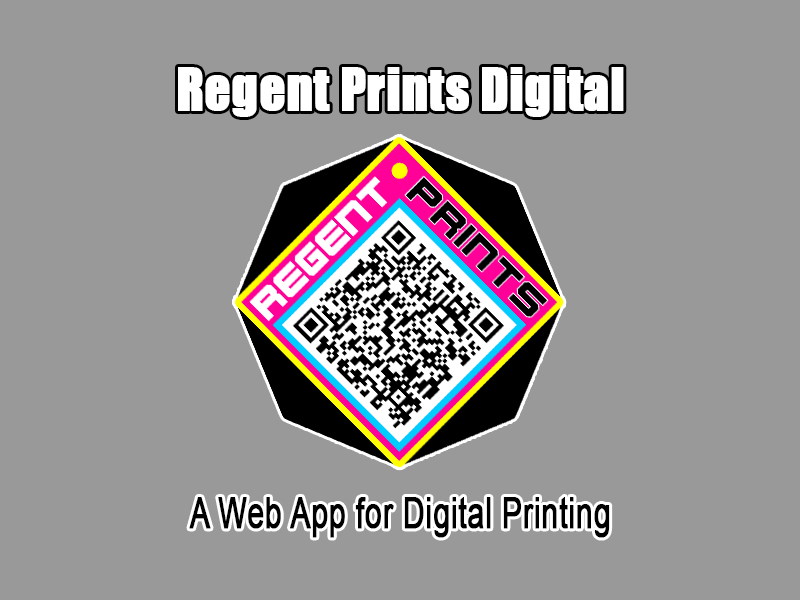
<style>
.page{position:relative;width:800px;height:600px;background:#999999}
.page>*{position:absolute;margin:0}
.t1{font:53.8px "Impact";color:#ffffff;font-weight:bold;scale:0.93 1}
.t2{font:43.1px "ArialMT";color:#000000;font-weight:bold;scale:0.7 1}
</style>
<div class="page">
<p class="t1" style="left:178px;top:67px;width:446px;height:50px">Regent Prints Digital</p>
<p class="t2" style="left:189px;top:497px;width:421px;height:41px">A Web App for Digital Printing</p>
</div>
